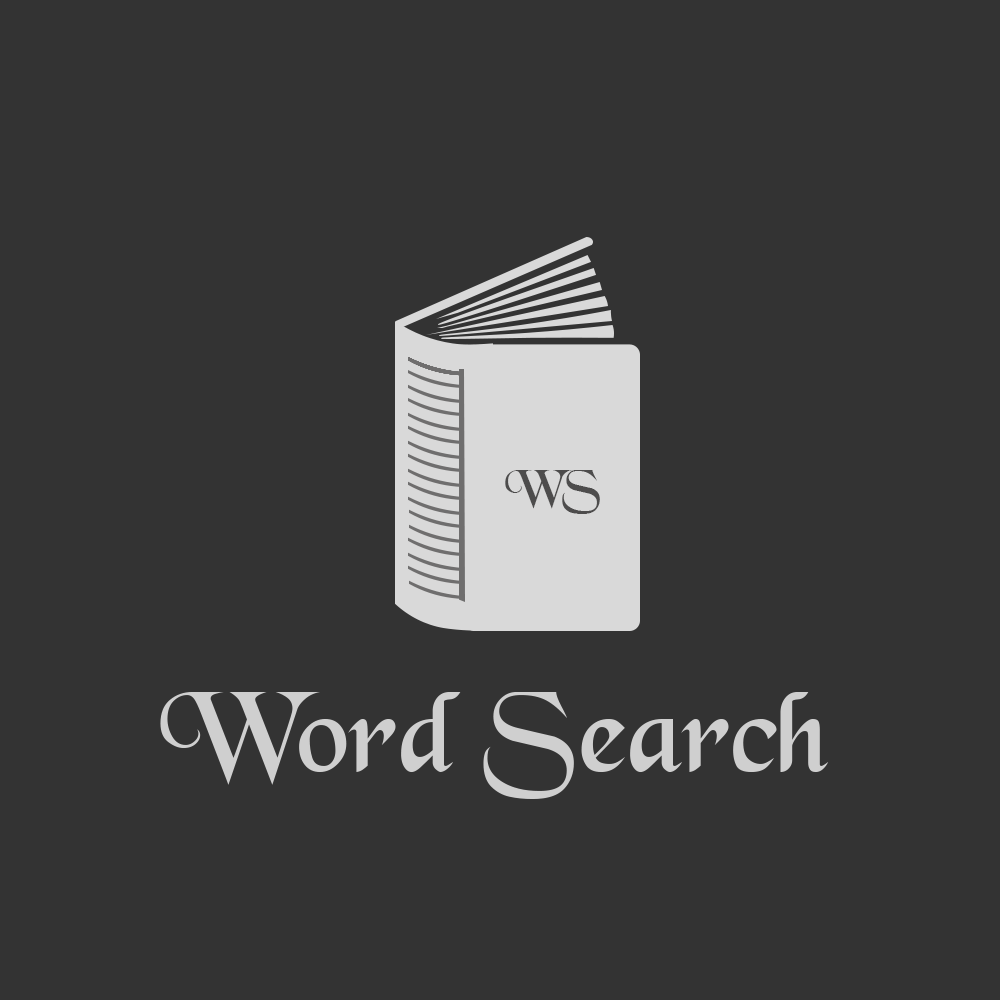
<style>
.page{position:relative;width:1000px;height:1000px;background:#333333}
.page>*{position:absolute;margin:0}
.t1{font:50px "BlackChancery";color:#4d4c4c}
.t2{font:120px "BlackChancery";color:#cfcfcf}
</style>
<div class="page">
<p class="t1" style="left:505px;top:470px;width:95px;height:44px">WS</p>
<p class="t2" style="left:160px;top:692px;width:669px;height:107px">Word Search</p>
</div>
